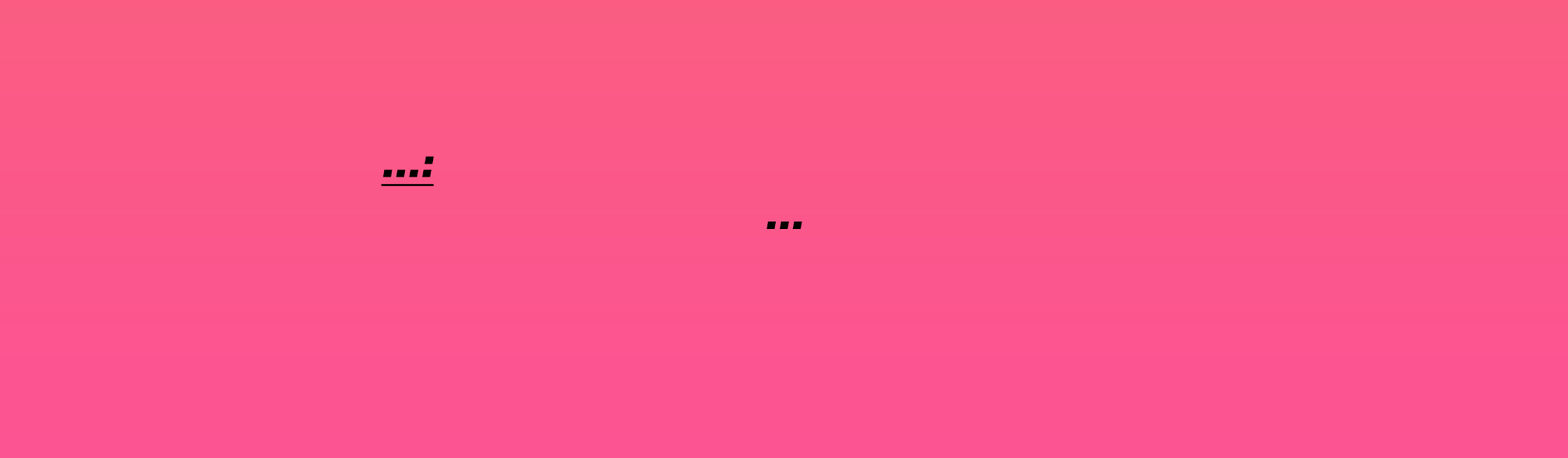
<style>
.page{position:relative;width:1568px;height:458px}
.page>*{position:absolute;margin:0}
.t1{font:41.5px/51.9px "FranklinGothic-Heavy";letter-spacing:0.04em;color:#000000;font-style:italic;text-decoration:underline}
.t2{font:41.5px/51.9px "FranklinGothic-Heavy";letter-spacing:0.04em;color:#000000;font-style:italic}
</style>
<div class="page">
<p class="t1" style="left:381px;top:156px;width:421px;height:73px">...:<br><span class="t2">...</span></p>
</div>
